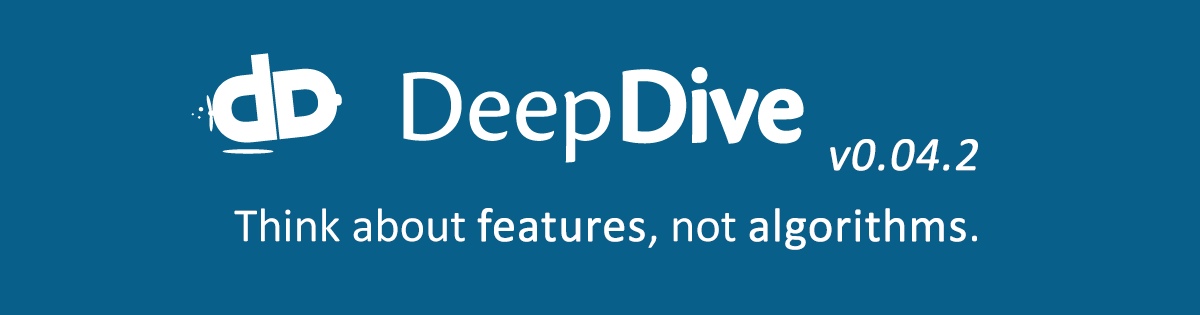
<style>
.page{position:relative;width:1200px;height:315px;background:#08608a}
.page>*{position:absolute;margin:0}
.t1{font:48px "Calibri";color:#ffffff;font-weight:bold;font-style:italic}
.t2{font:48px "Calibri";color:#ffffff}
.t3{font:48px "Calibri";color:#ffffff;font-weight:bold}
</style>
<div class="page">
<p class="t1" style="left:830px;top:139px;width:148px;height:32px">v0.04.2</p>
<p class="t2" style="left:234px;top:208px;width:743px;height:42px">Think about <span class="t3">features</span>, not <span class="t3">algorithms</span>.</p>
</div>
